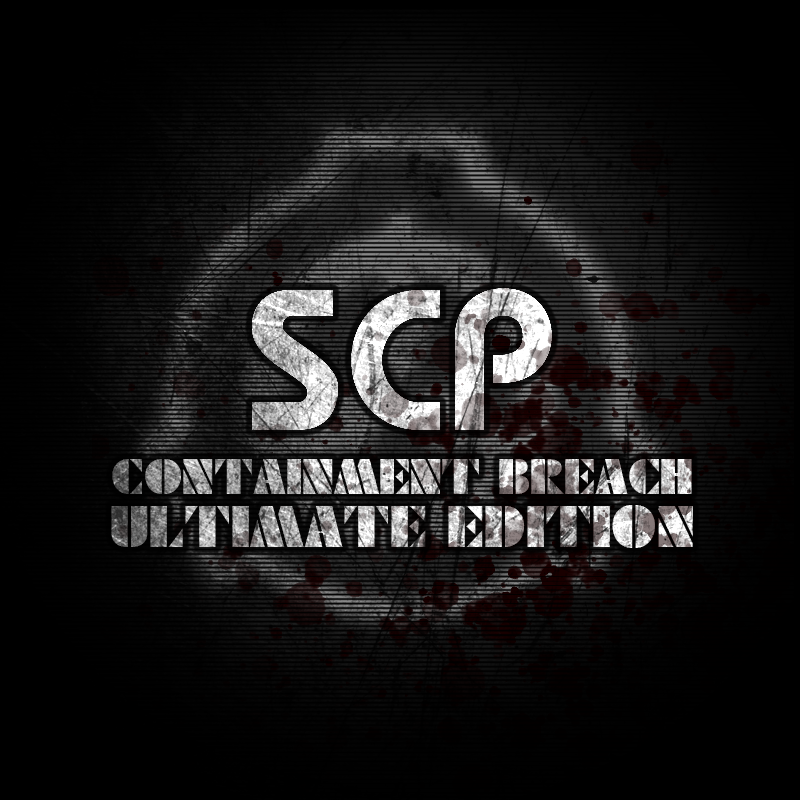
<style>
.page{position:relative;width:800px;height:800px;background:#000000}
.page>*{position:absolute;margin:0}
.t1{font:49.7px/53px "FuturaEugeniaCyrillic"}
.t2{font:59px/53px "FuturaEugeniaCyrillic"}
</style>
<div class="page">
<p class="t1" style="left:111px;top:459px;width:582px;height:89px;text-align:center">CONTAINMENT BREACH<br><span class="t2">ULTIMATE EDITION</span></p>
</div>
